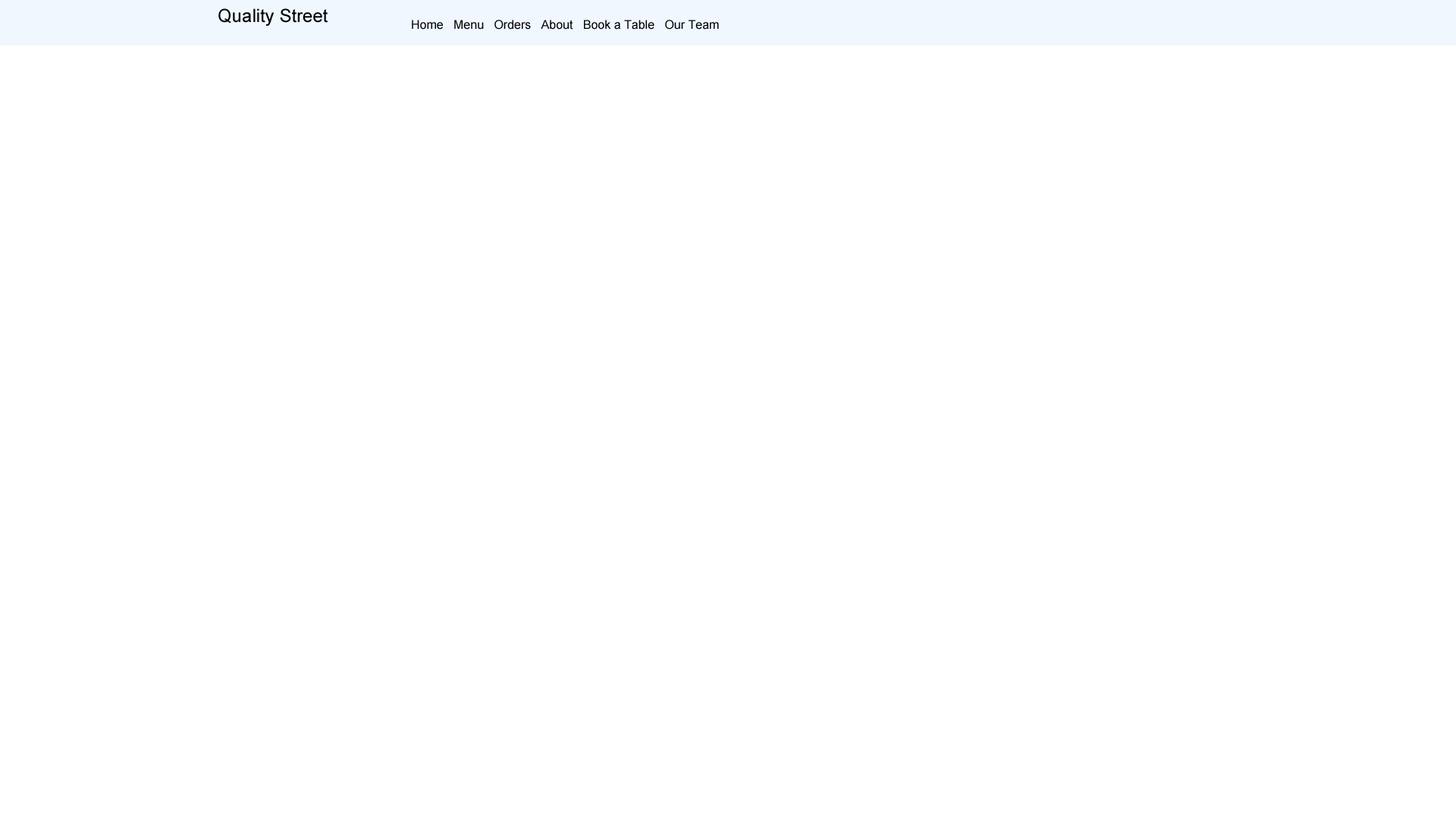
<style>
.page{position:relative;width:1456px;height:819px;background:#ffffff}
.page>*{position:absolute;margin:0}
.t1{font:18.2px "ArialMT";color:#000000}
.t2{font:12.1px "ArialMT";color:#000000}
</style>
<div class="page">
<p class="t1" style="left:218px;top:8px;width:110px;height:18px">Quality Street</p>
<p class="t2" style="left:412px;top:20px;width:307px;height:10px">Home   Menu   Orders   About   Book a Table   Our Team</p>
</div>
